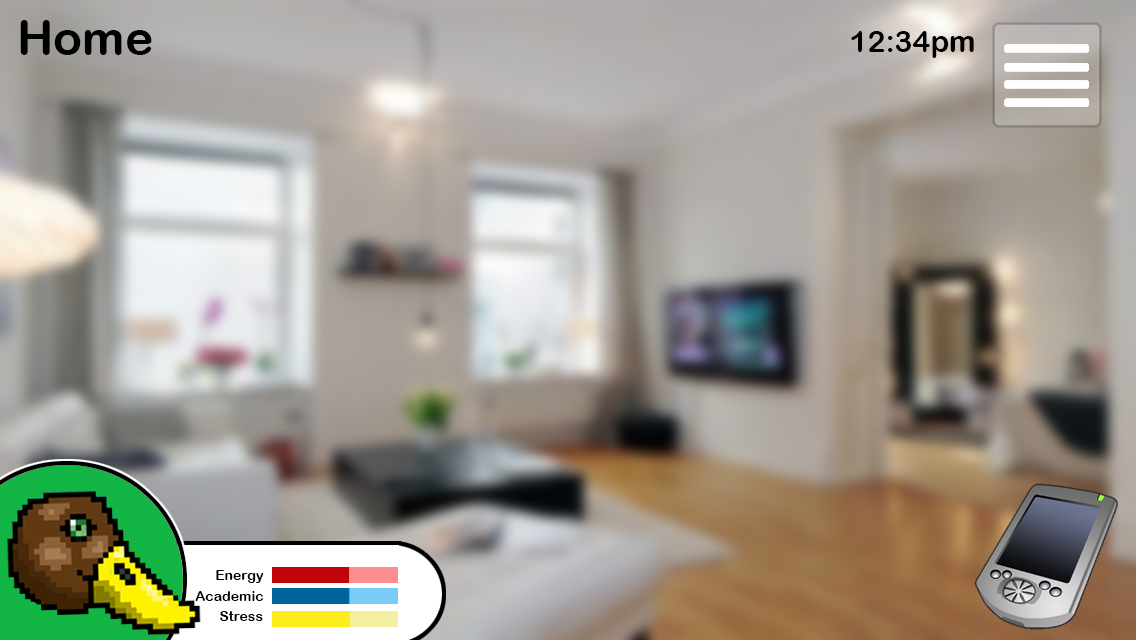
<style>
.page{position:relative;width:1136px;height:640px}
.page>*{position:absolute;margin:0}
.t1{font:48px "ArialRoundedMTBold";color:#000000}
.t2{font:30px "ArialRoundedMTBold";color:#000000}
.t3{font:14px "ArialRoundedMTBold";color:#000000}
</style>
<div class="page">
<p class="t1" style="left:20px;top:20px;width:132px;height:35px">Home</p>
<p class="t2" style="left:851px;top:31px;width:123px;height:27px">12:34pm</p>
<p class="t3" style="left:216px;top:570px;width:48px;height:13px">Energy</p>
<p class="t3" style="left:195px;top:591px;width:68px;height:10px">Academic</p>
<p class="t3" style="left:220px;top:611px;width:43px;height:10px">Stress</p>
</div>
